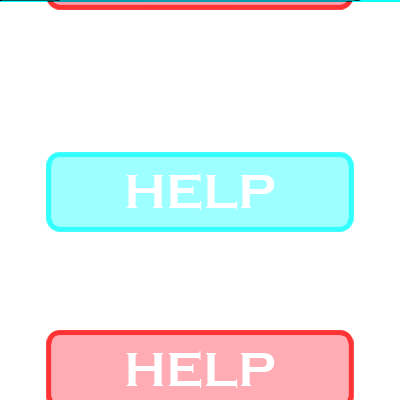
<style>
.page{position:relative;width:400px;height:400px;background:#ffffff}
.page>*{position:absolute;margin:0}
.t1{font:48.8px "CopperplateGothic-Bold";color:#ffffff}
</style>
<div class="page">
<p class="t1" style="left:126px;top:171px;width:149px;height:37px">HELP</p>
</div>
